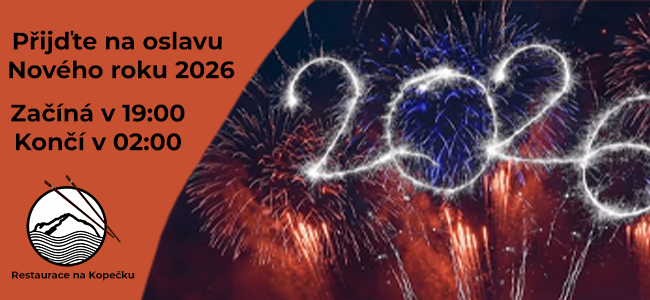
<style>
.page{position:relative;width:650px;height:300px;background:#c75031}
.page>*{position:absolute;margin:0}
.t1{font:24px "Montserrat-Bold";color:#000000}
.t2{font:10px "Montserrat-Bold";color:#000000}
</style>
<div class="page">
<p class="t1" style="left:9px;top:30px;width:226px;height:49px;text-align:center">Přijďte na oslavu <br>Nového roku 2026</p>
<p class="t1" style="left:11px;top:103px;width:174px;height:48px;text-align:center">Začíná v 19:00<br>Končí v 02:00</p>
<p class="t2" style="left:12px;top:271px;width:122px;height:10px">Restaurace na Kopečku</p>
</div>
